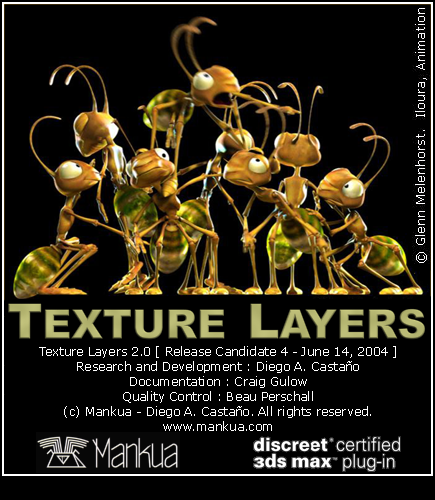
<style>
.page{position:relative;width:435px;height:500px;background:#000000}
.page>*{position:absolute;margin:0}
.t1{font:12px/15px "Verdana";color:#ffffff}
</style>
<div class="page">
<p class="t1" style="left:39px;top:346px;width:357px;height:85px;text-align:center">Texture Layers 2.0 [ Release Candidate 4 - June 14, 2004 ]<br>Research and Development : Diego A. Castaño<br>Documentation : Craig Gulow<br>Quality Control : Beau Perschall<br>(c) Mankua - Diego A. Castaño. All rights reserved.<br>www.mankua.com</p>
</div>
